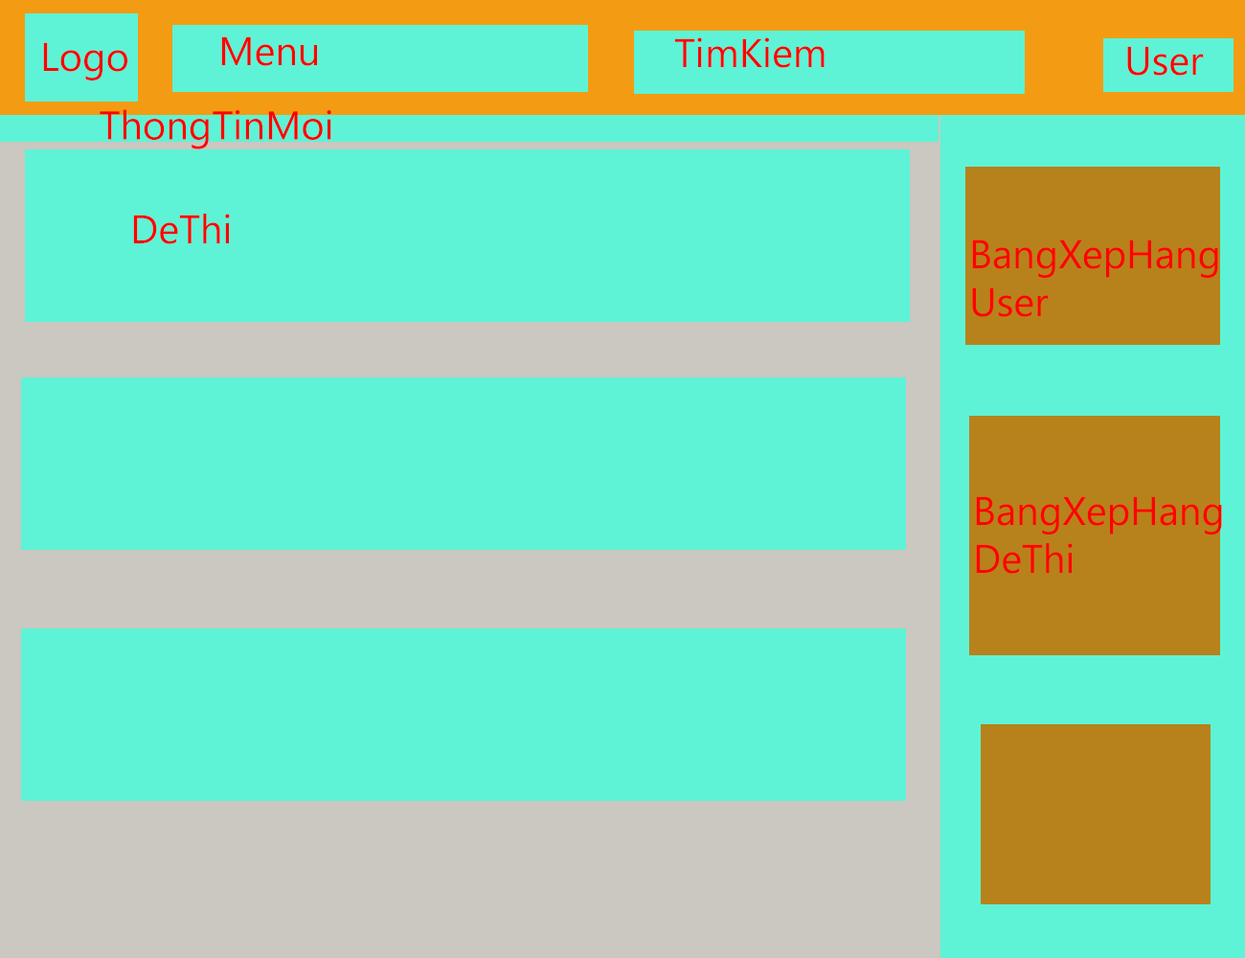
<style>
.page{position:relative;width:1245px;height:958px;background:#5ef3d6}
.page>*{position:absolute;margin:0}
.t1{font:39.9px "SegoeUI";color:#ff0000}
</style>
<div class="page">
<p class="t1" style="left:221px;top:36px;width:96px;height:30px">Menu</p>
<p class="t1" style="left:674px;top:37px;width:151px;height:31px">TimKiem</p>
<p class="t1" style="left:43px;top:42px;width:84px;height:38px">Logo</p>
<p class="t1" style="left:1127px;top:46px;width:77px;height:30px">User</p>
<p class="t1" style="left:100px;top:109px;width:231px;height:40px">ThongTinMoi</p>
<p class="t1" style="left:133px;top:214px;width:97px;height:30px">DeThi</p>
<p class="t1" style="left:972px;top:239px;width:246px;height:78px">BangXepHang<br>User</p>
<p class="t1" style="left:976px;top:496px;width:246px;height:78px">BangXepHang<br>DeThi</p>
</div>
